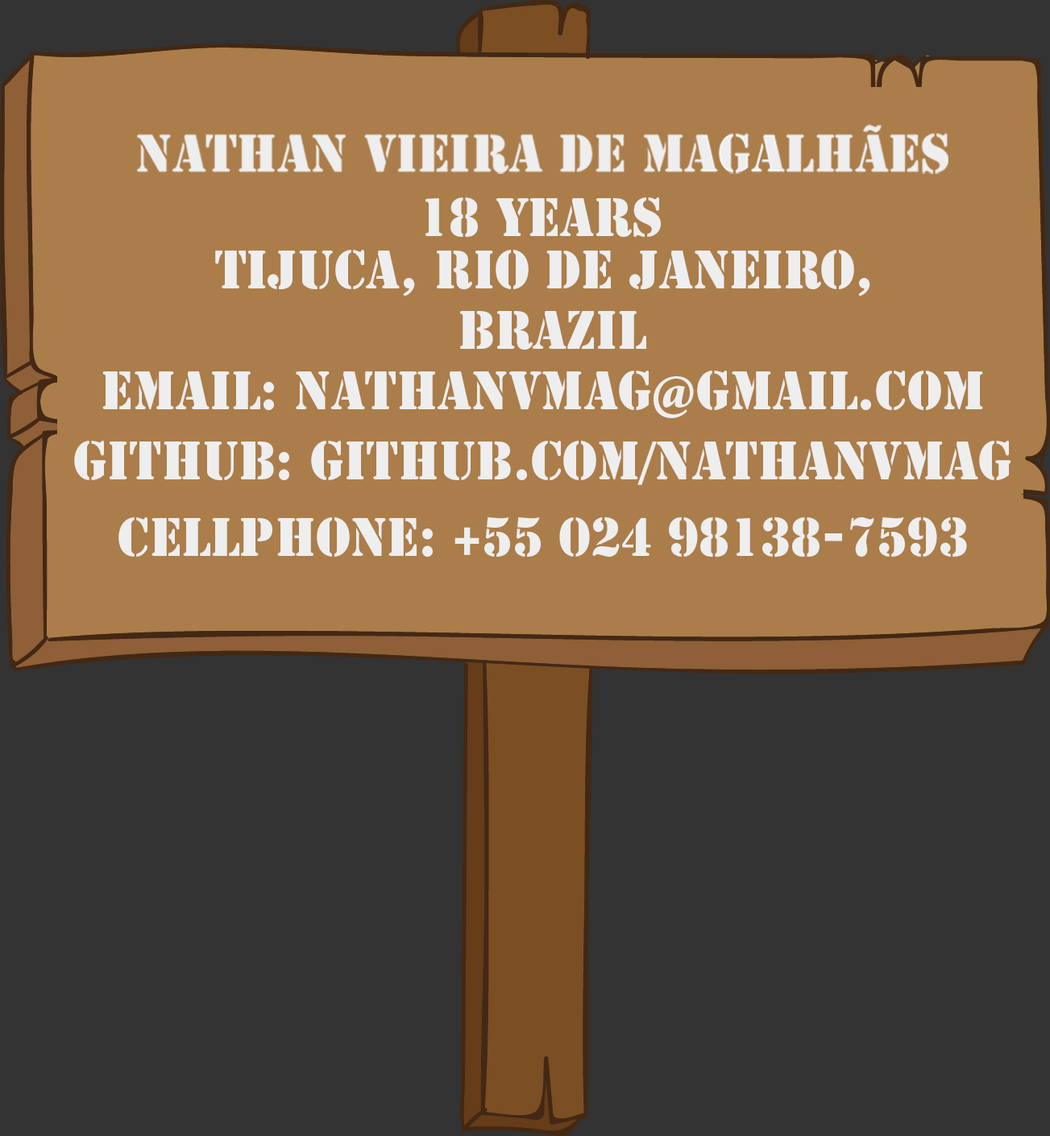
<style>
.page{position:relative;width:1050px;height:1136px;background:#333333}
.page>*{position:absolute;margin:0}
.t1{font:12.1px "StencilStd";color:#eeeeee;scale:0.97 1}
</style>
<div class="page">
<p class="t1" style="left:425px;top:197px;width:236px;height:40px">18 Years</p>
<p class="t1" style="left:215px;top:250px;width:655px;height:100px;text-align:center">tijuca, Rio de janeiro,<br> Brazil</p>
<p class="t1" style="left:102px;top:371px;width:881px;height:47px">Email: nathanvmag@gmail.com</p>
<p class="t1" style="left:74px;top:441px;width:937px;height:44px">Github: github.com/nathanvmag</p>
<p class="t1" style="left:118px;top:517px;width:849px;height:40px">Cellphone: +55 024 98138-7593</p>
</div>
